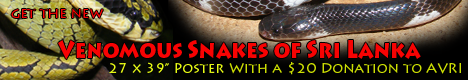
<style>
.page{position:relative;width:468px;height:80px}
.page>*{position:absolute;margin:0}
.t1{font:14px "LithosPro-Regular";color:#f70303}
.t2{font:24.7px "LithosPro-Black";color:#f70303;scale:0.83 1}
.t3{font:14px "LithosPro-Regular";color:#e5f815}
.t4{font:14px "LithosPro-Regular";color:#cbdd03}
</style>
<div class="page">
<p class="t1" style="left:11px;top:8px;width:92px;height:11px">get the new</p>
<p class="t2" style="left:58px;top:40px;width:363px;height:20px">Venomous Snakes of Sri Lanka</p>
<p class="t3" style="left:109px;top:62px;width:115px;height:11px">27 x 39” Poster</p>
<p class="t4" style="left:229px;top:62px;width:232px;height:13px">With a $20 Donation to AVRI</p>
</div>
